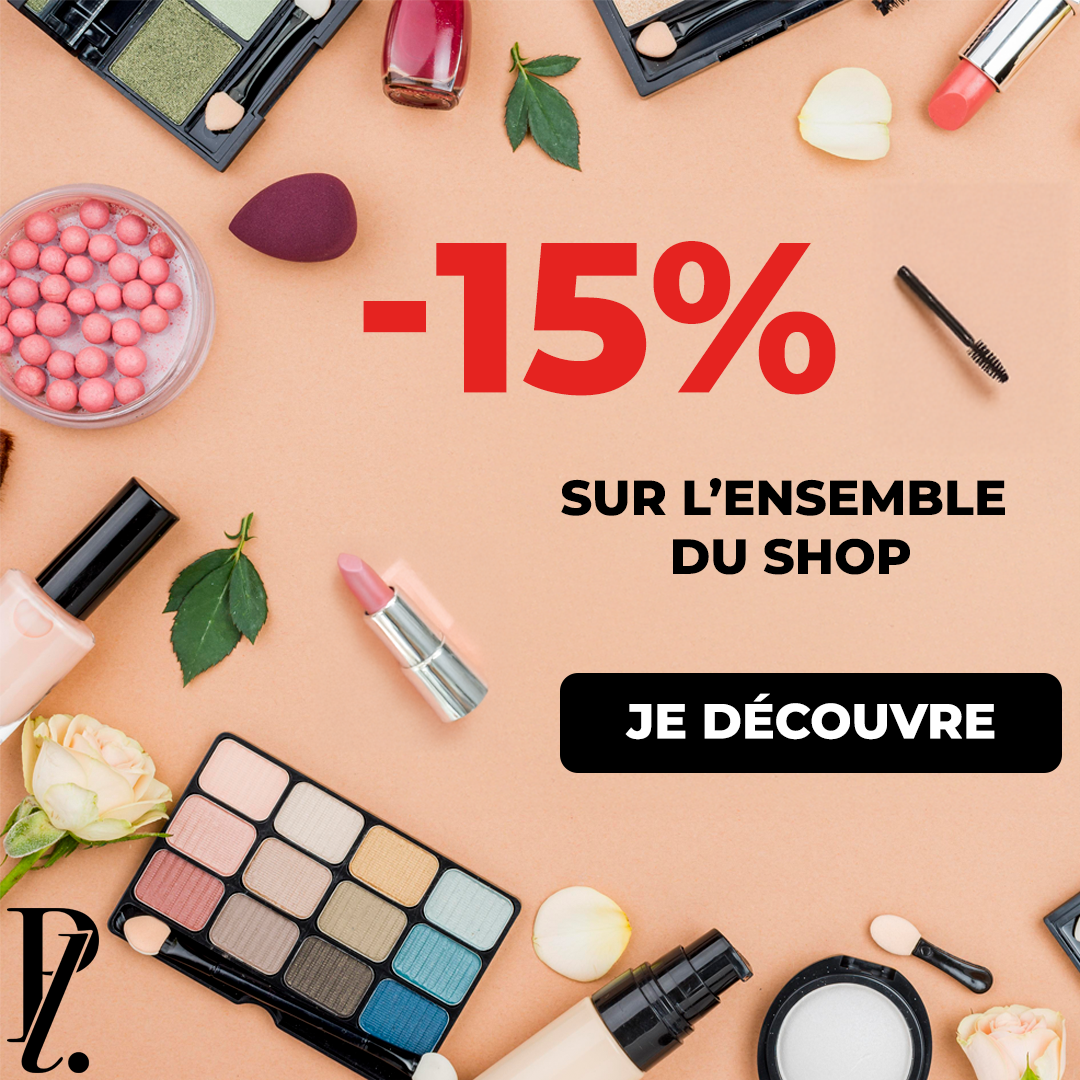
<style>
.page{position:relative;width:1080px;height:1080px}
.page>*{position:absolute;margin:0}
.t1{font:213.3px "Montserrat-ExtraBold";color:#e52320;text-transform:uppercase}
.t2{font:49px "Montserrat-ExtraBold";color:#000000;text-transform:uppercase}
.t3{font:49px "Montserrat-ExtraBold";color:#ffffff;text-transform:uppercase}
</style>
<div class="page">
<p class="t1" style="left:363px;top:241px;width:473px;height:155px">-15%</p>
<p class="t2" style="left:561px;top:478px;width:444px;height:97px;text-align:center">Sur l’ensemble<br> du shop</p>
<p class="t3" style="left:625px;top:693px;width:370px;height:47px">JE DÉCOUVRE</p>
</div>
